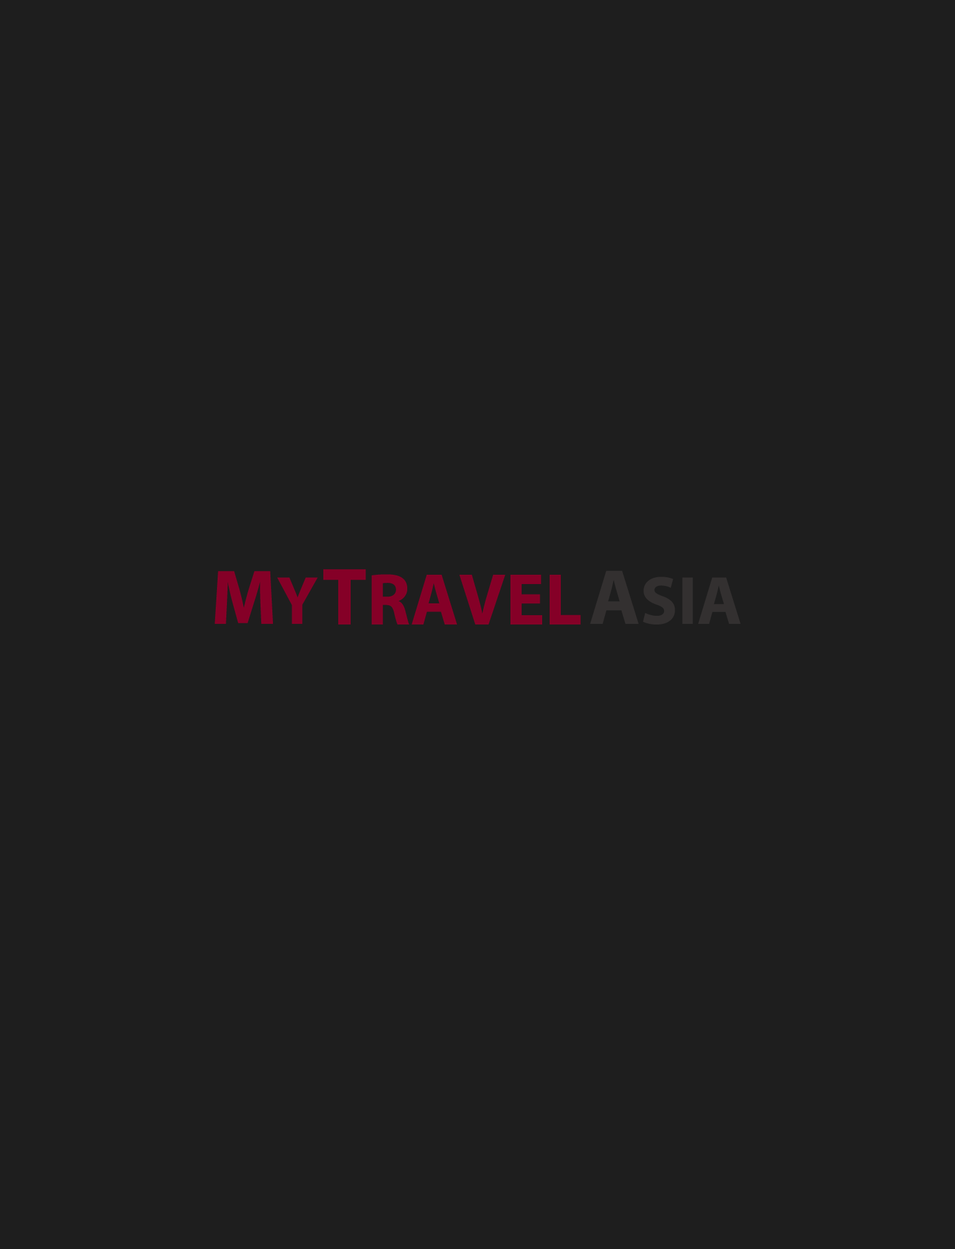
<style>
.page{position:relative;width:955px;height:1249px;background:#1e1e1e}
.page>*{position:absolute;margin:0}
.t1{font:73.7px "MyriadPro-Bold";color:#850027}
.t2{font:81.9px "MyriadPro-Bold";color:#850027}
.t3{font:78.3px "MyriadPro-Bold";color:#850027}
.t4{font:68.7px "MyriadPro-Bold";color:#850027}
.t5{font:68.8px "MyriadPro-Bold";color:#333030}
.t6{font:78.6px "MyriadPro-Bold";color:#333030}
</style>
<div class="page">
<p class="t1" style="left:323px;top:569px;width:258px;height:55px"><span class="t2">T</span>RAVEL</p>
<p class="t3" style="left:215px;top:571px;width:103px;height:53px">M<span class="t4">Y</span></p>
<p class="t5" style="left:590px;top:570px;width:151px;height:54px"><span class="t6">A</span>SIA</p>
</div>
